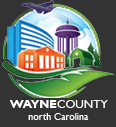
<style>
.page{position:relative;width:116px;height:127px;background:#333333}
.page>*{position:absolute;margin:0}
.t1{font:12px "GillSansMT";color:#ffffff}
.t2{font:12px "GillSansMT-Bold";color:#ffffff}
.t3{font:10px "GillSansMT";color:#ffffff}
</style>
<div class="page">
<p class="t1" style="left:9px;top:100px;width:99px;height:8px"><span class="t2">WAYNE</span>COUNTY</p>
<p class="t3" style="left:28px;top:113px;width:61px;height:7px">north Carolina</p>
</div>
